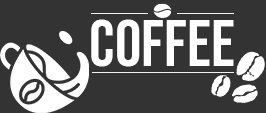
<style>
.page{position:relative;width:266px;height:113px;background:#333333}
.page>*{position:absolute;margin:0}
.t1{font:66.4px "BebasNeue-Regular";color:#ffffff}
</style>
<div class="page">
<p class="t1" style="left:91px;top:19px;width:143px;height:48px">coffee</p>
</div>
